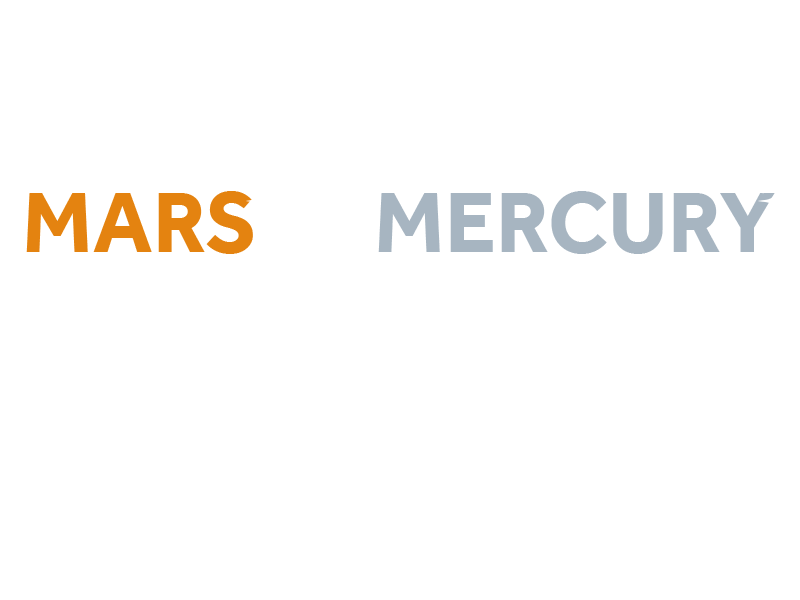
<style>
.page{position:relative;width:800px;height:600px;background:#ffffff}
.page>*{position:absolute;margin:0}
.t1{font:88.4px "Effra-Bold";color:#a7b5c1}
.t2{font:88.4px "Effra-Bold";color:#e48310}
.t3{font:88.4px "Effra-Bold";color:#ffffff}
</style>
<div class="page">
<p class="t1" style="left:26px;top:191px;width:749px;height:63px"><span class="t2">MARS</span><span class="t3"> or </span>MERCURY</p>
</div>
